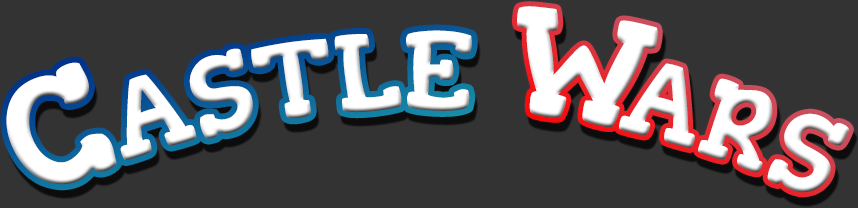
<style>
.page{position:relative;width:858px;height:208px;background:#333333}
.page>*{position:absolute;margin:0}
.t1{font:155.8px "Gorditas-Regular";letter-spacing:0.01em;color:#ffffff;font-variant:small-caps;scale:0.56 1}
.t2{font:155.8px "Gorditas-Regular";letter-spacing:-0.13em;color:#ffffff;font-variant:small-caps;scale:0.56 1}
.t3{font:155.8px "Gorditas-Regular";letter-spacing:-0.01em;color:#ffffff;font-variant:small-caps;scale:0.56 1}
</style>
<div class="page">
<p class="t1" style="left:517px;top:6px;width:332px;height:187px"><span class="t2">W</span><span class="t3">a</span>rs</p>
<p class="t1" style="left:6px;top:30px;width:466px;height:155px">Castle</p>
</div>
